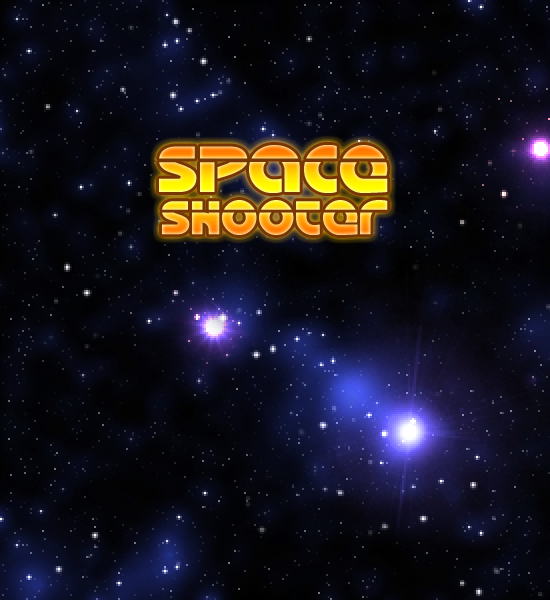
<style>
.page{position:relative;width:550px;height:600px}
.page>*{position:absolute;margin:0}
.t1{font:35px "Oasis";letter-spacing:-0.025em}
.t2{font:48px "Oasis";letter-spacing:-0.025em}
</style>
<div class="page">
<p class="t1" style="left:159px;top:145px;width:229px;height:90px;text-align:center"><span class="t2">Space<br></span>Shooter</p>
</div>
